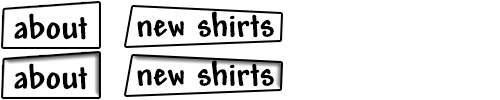
<style>
.page{position:relative;width:500px;height:100px;background:#ffffff}
.page>*{position:absolute;margin:0}
.t1{font:36px "Andy-Bold";color:#000000}
</style>
<div class="page">
<p class="t1" style="left:14px;top:13px;width:74px;height:27px">about</p>
<p class="t1" style="left:137px;top:11px;width:137px;height:27px">new shirts</p>
<p class="t1" style="left:14px;top:63px;width:74px;height:27px">about</p>
<p class="t1" style="left:137px;top:60px;width:137px;height:27px">new shirts</p>
</div>
